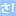
<style>
.page{position:relative;width:16px;height:16px;background:#91c3ff}
.page>*{position:absolute;margin:0}
.t1{font:10.9px "KozGoPr6N-Regular";color:#ffffff;font-weight:bold}
</style>
<div class="page">
<p class="t1" style="left:0px;top:3px;width:14px;height:10px">さ！</p>
</div>
